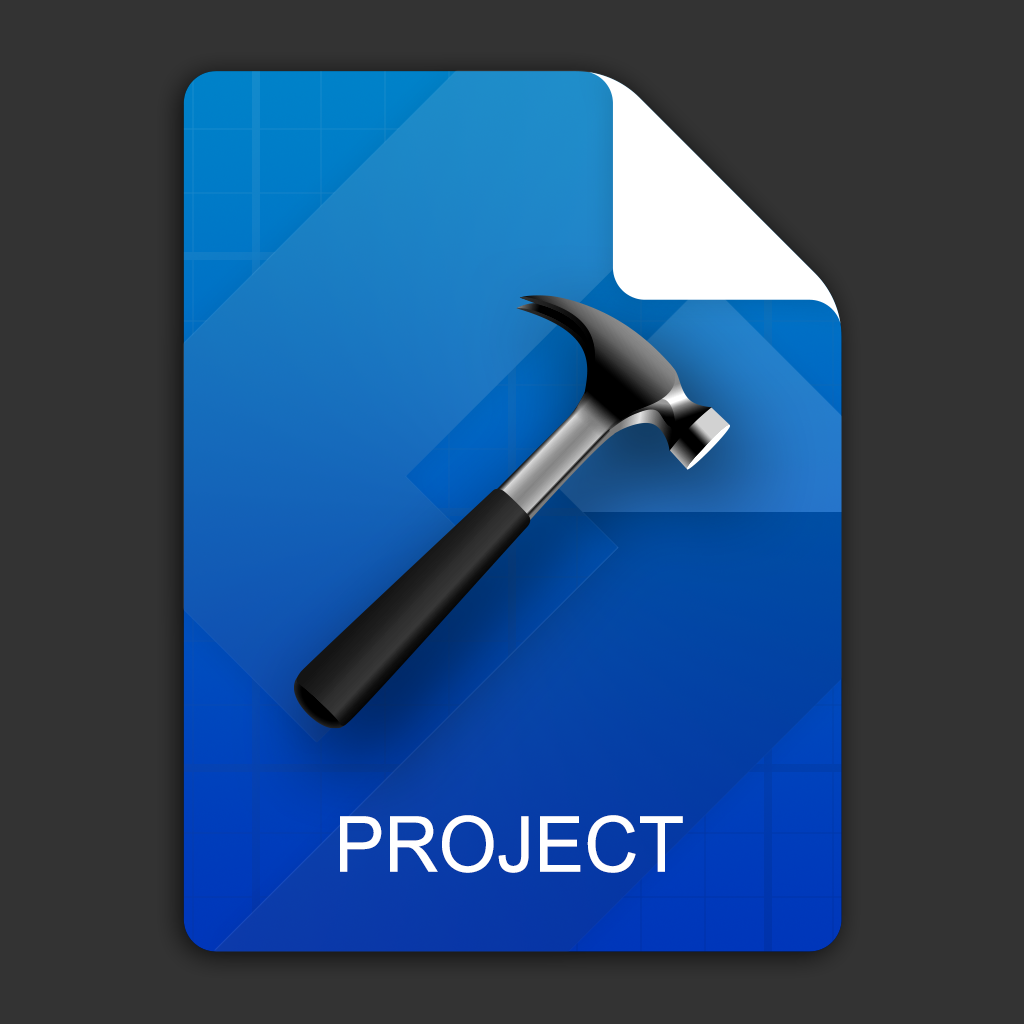
<style>
.page{position:relative;width:1024px;height:1024px;background:#333333}
.page>*{position:absolute;margin:0}
.t1{font:77.3px "ArialMT";color:#ffffff}
</style>
<div class="page">
<p class="t1" style="left:340px;top:815px;width:343px;height:58px">PROJECT</p>
</div>
